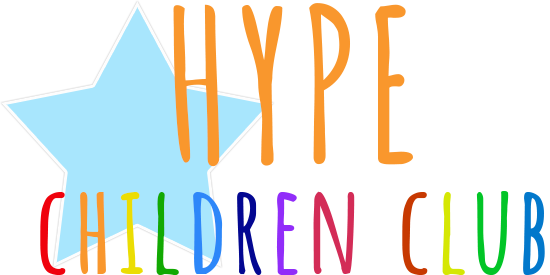
<style>
.page{position:relative;width:550px;height:275px;background:#ffffff}
.page>*{position:absolute;margin:0}
.t1{font:209px/22px "AmaticSC-Bold";letter-spacing:0.05em;color:#f9972d}
.t2{font:121px/22px "AmaticSC-Bold";letter-spacing:0.05em;color:#ef020d}
.t3{font:121px/22px "AmaticSC-Bold";letter-spacing:0.05em;color:#f9972d}
.t4{font:121px/22px "AmaticSC-Bold";letter-spacing:0.05em;color:#ebdd03}
.t5{font:121px/22px "AmaticSC-Bold";letter-spacing:0.05em;color:#12a902}
.t6{font:121px/22px "AmaticSC-Bold";letter-spacing:0.05em;color:#2d88f9}
.t7{font:121px/22px "AmaticSC-Bold";letter-spacing:0.05em;color:#030791}
.t8{font:121px/22px "AmaticSC-Bold";letter-spacing:0.05em;color:#922df9}
.t9{font:121px/22px "AmaticSC-Bold";letter-spacing:0.05em;color:#d32c57}
.t10{font:121px/22px "AmaticSC-Bold";letter-spacing:0.05em;color:#c73901}
.t11{font:121px/22px "AmaticSC-Bold";letter-spacing:0.05em;color:#d5e804}
.t12{font:121px/22px "AmaticSC-Bold";letter-spacing:0.05em;color:#02c627}
.t13{font:121px/22px "AmaticSC-Bold";letter-spacing:0.05em;color:#0278cb}
</style>
<div class="page">
<p class="t1" style="left:40px;top:3px;width:505px;height:273px;text-align:center">HYPE<br><br><br><br><span class="t2"><br>c</span><span class="t3">h</span><span class="t4">i</span><span class="t5">l</span><span class="t6">d</span><span class="t7">r</span><span class="t8">e</span><span class="t9">n </span><span class="t10">c</span><span class="t11">l</span><span class="t12">u</span><span class="t13">b</span></p>
</div>
